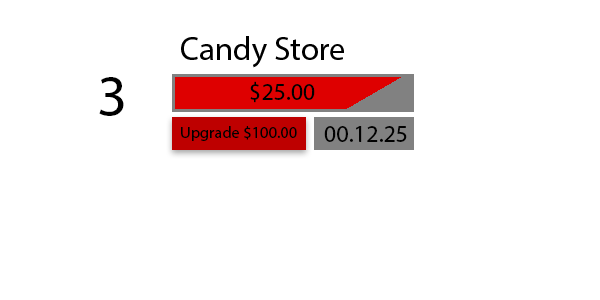
<style>
.page{position:relative;width:600px;height:300px;background:#ffffff}
.page>*{position:absolute;margin:0}
.t1{font:32.9px "MyriadPro-Regular";color:#000000}
.t2{font:59px "MyriadPro-Regular";color:#000000}
.t3{font:24px "MyriadPro-Regular";color:#000000}
.t4{font:16.4px "MyriadPro-Regular";color:#000000}
</style>
<div class="page">
<p class="t1" style="left:181px;top:36px;width:163px;height:32px">Candy Store</p>
<p class="t2" style="left:99px;top:77px;width:25px;height:39px">3</p>
<p class="t3" style="left:250px;top:81px;width:65px;height:22px">$25.00</p>
<p class="t4" style="left:181px;top:126px;width:116px;height:15px">Upgrade $100.00</p>
<p class="t3" style="left:324px;top:126px;width:83px;height:16px">00.12.25</p>
</div>
